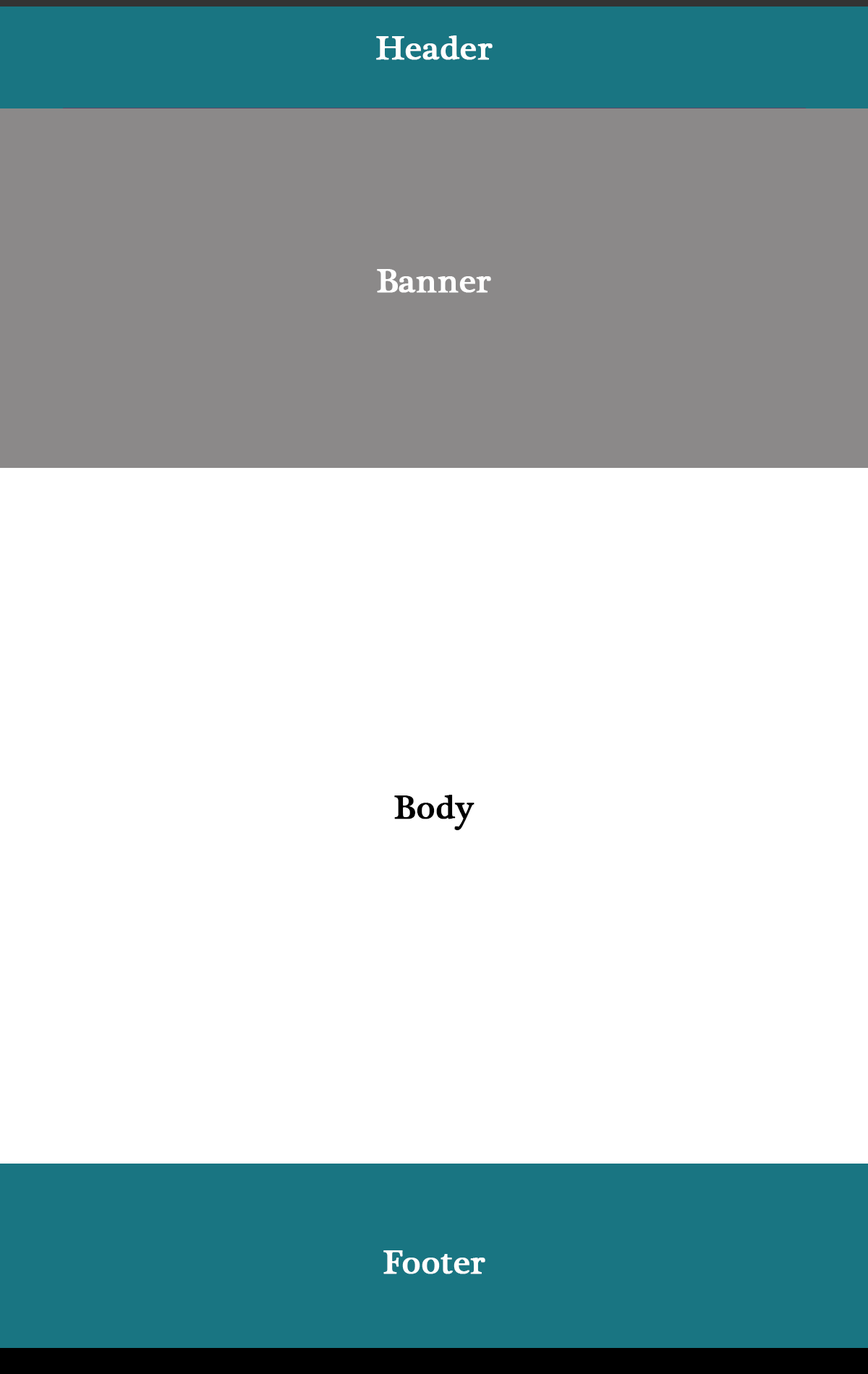
<style>
.page{position:relative;width:868px;height:1374px;background:#ffffff}
.page>*{position:absolute;margin:0}
.t1{font:34.7px "PlantagenetCherokee";color:#ffffff;font-weight:bold}
.t2{font:34.7px "PlantagenetCherokee";color:#000000;font-weight:bold}
</style>
<div class="page">
<p class="t1" style="left:376px;top:35px;width:116px;height:25px">Header</p>
<p class="t1" style="left:377px;top:269px;width:114px;height:24px">Banner</p>
<p class="t2" style="left:394px;top:795px;width:80px;height:35px">Body</p>
<p class="t1" style="left:383px;top:1250px;width:102px;height:24px">Footer</p>
</div>
